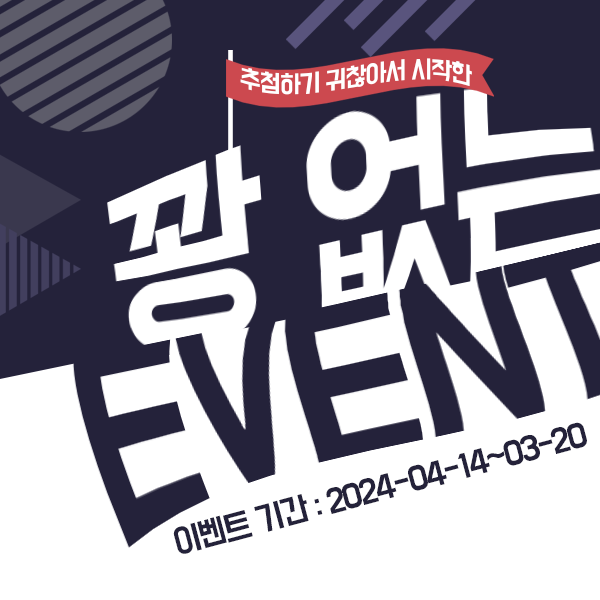
<style>
.page{position:relative;width:600px;height:600px;background:#ffffff}
.page>*{position:absolute;margin:0}
.t1{font:22.2px "BMDoHyeon";letter-spacing:-0.06em;color:#ffffff}
.t2{font:29.3px "BMDoHyeon";letter-spacing:-0.06em;color:#24223a}
</style>
<div class="page">
<p class="t1" style="left:240px;top:58px;width:232px;height:37px">추첨하기 귀찮아서 시작한</p>
<p class="t2" style="left:173px;top:422px;width:414px;height:132px;rotate:-15deg">이벤트 기간 : 2024-04-14~03-20</p>
</div>
